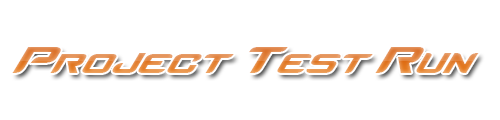
<style>
.page{position:relative;width:500px;height:120px;background:#ffffff}
.page>*{position:absolute;margin:0}
.t1{font:60.7px "Counter-StrikeRegular";scale:0.86 1}
</style>
<div class="page">
<p class="t1" style="left:12px;top:47px;width:467px;height:26px">Project Test Run</p>
</div>
